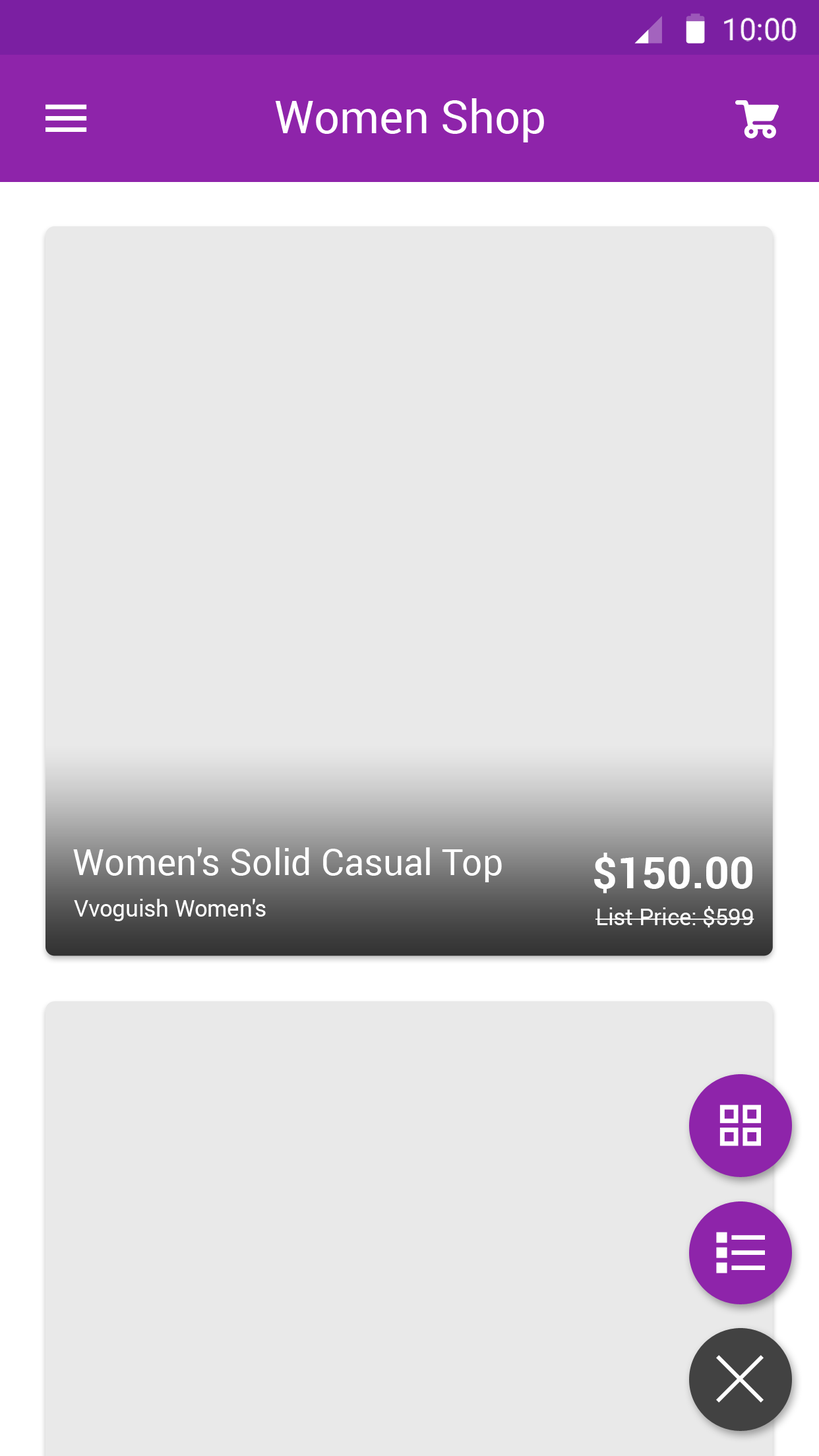
<style>
.page{position:relative;width:819px;height:1456px;background:#e9e9e9}
.page>*{position:absolute;margin:0}
.t1{font:30.3px "Roboto-Regular";color:#ffffff}
.t2{font:45.5px "Roboto-Regular";color:#ffffff}
.t3{font:36.4px "Roboto-Regular";color:#ffffff}
.t4{font:43.5px "Roboto-Bold";color:#ffffff}
.t5{font:22.7px "Roboto-Regular";color:#ffffff}
</style>
<div class="page">
<p class="t1" style="left:724px;top:18px;width:73px;height:24px">10:00</p>
<p class="t2" style="left:275px;top:98px;width:269px;height:44px">Women Shop</p>
<p class="t3" style="left:73px;top:847px;width:429px;height:35px">Women's Solid Casual Top</p>
<p class="t4" style="left:594px;top:853px;width:158px;height:41px">$150.00</p>
<p class="t5" style="left:74px;top:899px;width:192px;height:22px">Vvoguish Women's</p>
<p class="t5" style="left:595px;top:906px;width:159px;height:22px">List Price: $599</p>
</div>
